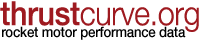
<style>
.page{position:relative;width:200px;height:40px;background:#ffffff}
.page>*{position:absolute;margin:0}
.t1{font:33.3px "HelveticaNeue-Light";letter-spacing:-0.01em;color:#9e1a20;scale:0.91 1}
.t2{font:33.3px "HelveticaNeue-Medium";letter-spacing:-0.01em;color:#9e1a20;scale:0.91 1}
.t3{font:14.4px "HelveticaNeue-Medium";letter-spacing:-0.015em;color:#000000;scale:0.91 1}
</style>
<div class="page">
<p class="t1" style="left:0px;top:1px;width:199px;height:31px"><span class="t2">thrust</span>curve.org</p>
<p class="t3" style="left:2px;top:26px;width:184px;height:14px">rocket motor performance data</p>
</div>
